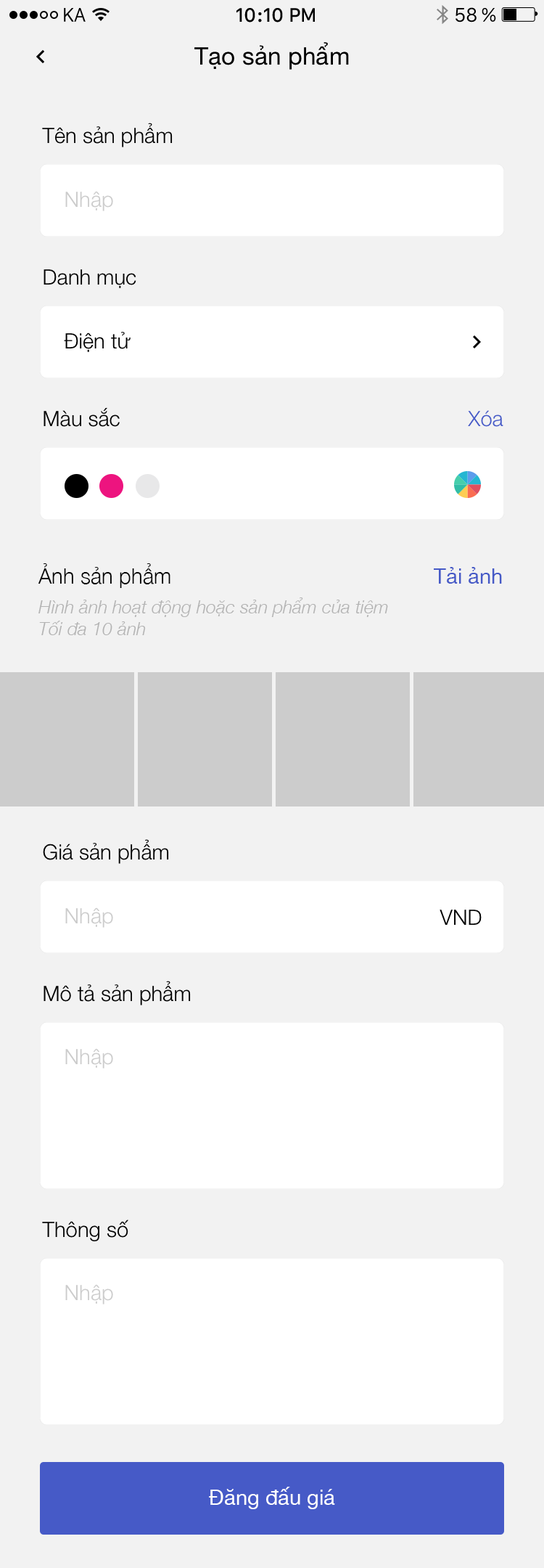
<style>
.page{position:relative;width:544px;height:1568px;background:#f2f2f2}
.page>*{position:absolute;margin:0}
.t1{font:24.2px "HelveticaNeue";color:#000000}
.t2{font:21.2px "HelveticaNeue-Light";color:#000000}
.t3{font:21.2px "HelveticaNeue-Light";color:#cccccc}
.t4{font:21.2px "HelveticaNeue-Light";color:#465ac7}
.t5{font:21.2px "HelveticaNeue";color:#465ac7}
.t6{font:18.1px "HelveticaNeue-LightItalic";color:#b3b3b3}
.t7{font:21.2px "HelveticaNeue";color:#ffffff}
</style>
<div class="page">
<p class="t1" style="left:195px;top:42px;width:154px;height:28px">Tạo sản phẩm</p>
<p class="t2" style="left:42px;top:123px;width:131px;height:24px">Tên sản phẩm</p>
<p class="t3" style="left:65px;top:191px;width:48px;height:20px">Nhập</p>
<p class="t2" style="left:44px;top:269px;width:92px;height:19px">Danh mục</p>
<p class="t2" style="left:64px;top:332px;width:67px;height:20px">Điện tử</p>
<p class="t2" style="left:44px;top:407px;width:76px;height:20px">Màu sắc</p>
<p class="t4" style="left:468px;top:410px;width:36px;height:17px">Xóa</p>
<p class="t2" style="left:38px;top:563px;width:133px;height:25px">Ảnh sản phẩm</p>
<p class="t5" style="left:434px;top:567px;width:68px;height:17px">Tải ảnh</p>
<p class="t6" style="left:38px;top:597px;width:350px;height:38px">Hình ảnh hoạt động hoặc sản phẩm của tiệm<br>Tối đa 10 ảnh</p>
<p class="t2" style="left:43px;top:839px;width:126px;height:25px">Giá sản phẩm</p>
<p class="t3" style="left:65px;top:907px;width:48px;height:21px">Nhập</p>
<p class="t2" style="left:440px;top:910px;width:42px;height:15px">VND</p>
<p class="t2" style="left:44px;top:981px;width:147px;height:24px">Mô tả sản phẩm</p>
<p class="t3" style="left:65px;top:1048px;width:48px;height:21px">Nhập</p>
<p class="t2" style="left:42px;top:1220px;width:86px;height:21px">Thông số</p>
<p class="t3" style="left:65px;top:1284px;width:48px;height:20px">Nhập</p>
<p class="t7" style="left:209px;top:1487px;width:126px;height:22px">Đăng đấu giá</p>
</div>
